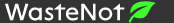
<style>
.page{position:relative;width:174px;height:23px;background:#333333}
.page>*{position:absolute;margin:0}
.t1{font:24px "Lack-Regular";color:#ffffff}
</style>
<div class="page">
<p class="t1" style="left:5px;top:3px;width:120px;height:18px">WasteNot</p>
</div>
